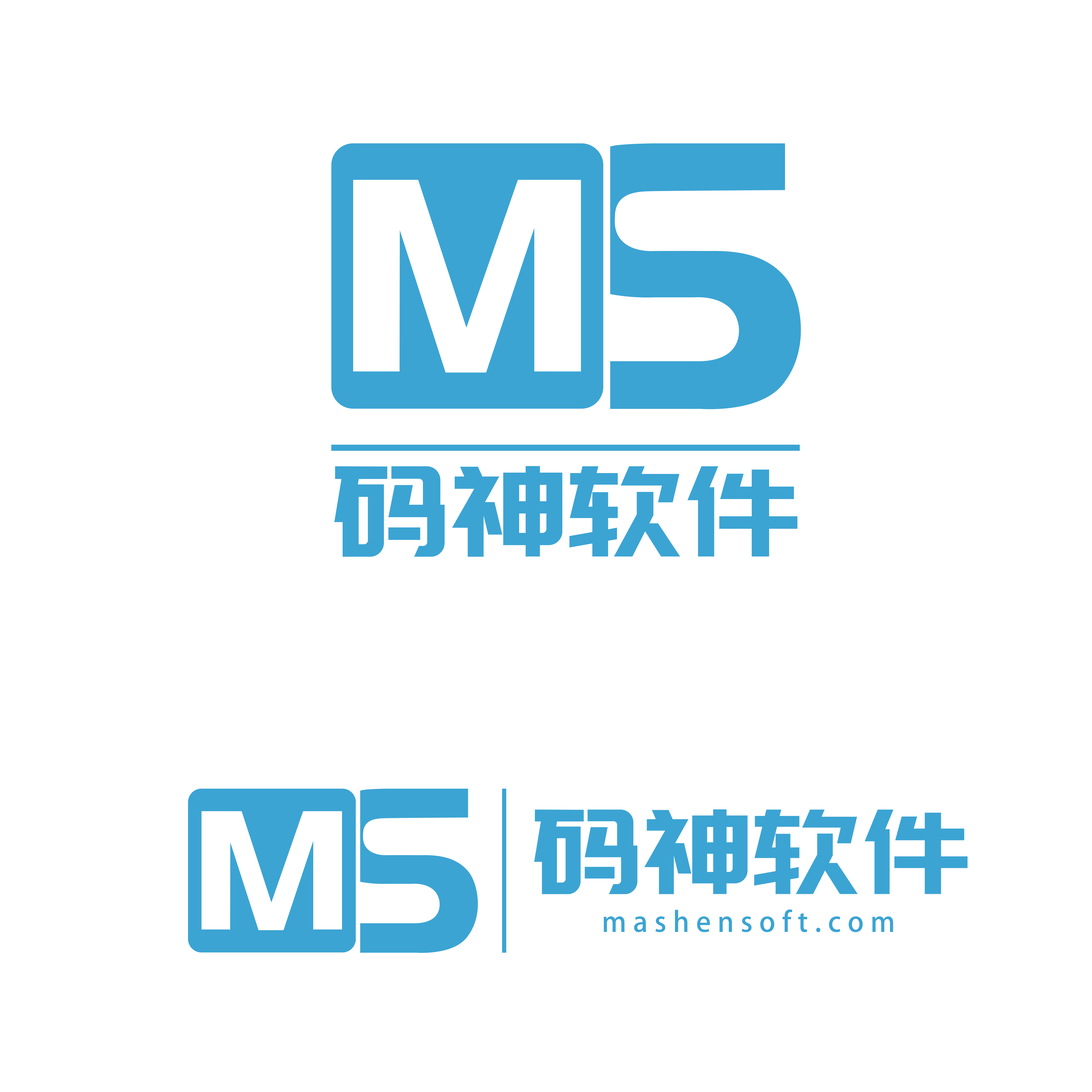
<style>
.page{position:relative;width:1092px;height:1092px;background:#ffffff}
.page>*{position:absolute;margin:0}
.t1{font:125.1px "PangMenZhengDao";letter-spacing:0.02em;color:#3ba4d3}
.t2{font:117.1px "PangMenZhengDao";letter-spacing:0.02em;color:#3ba4d3}
.t3{font:27.5px "AdobeHeitiStd-Regular";letter-spacing:0.24em;color:#3ba4d3}
</style>
<div class="page">
<p class="t1" style="left:334px;top:466px;width:464px;height:91px">码神软件</p>
<p class="t2" style="left:534px;top:809px;width:434px;height:85px">码神软件</p>
<p class="t3" style="left:604px;top:909px;width:289px;height:23px">mashensoft.com</p>
</div>
